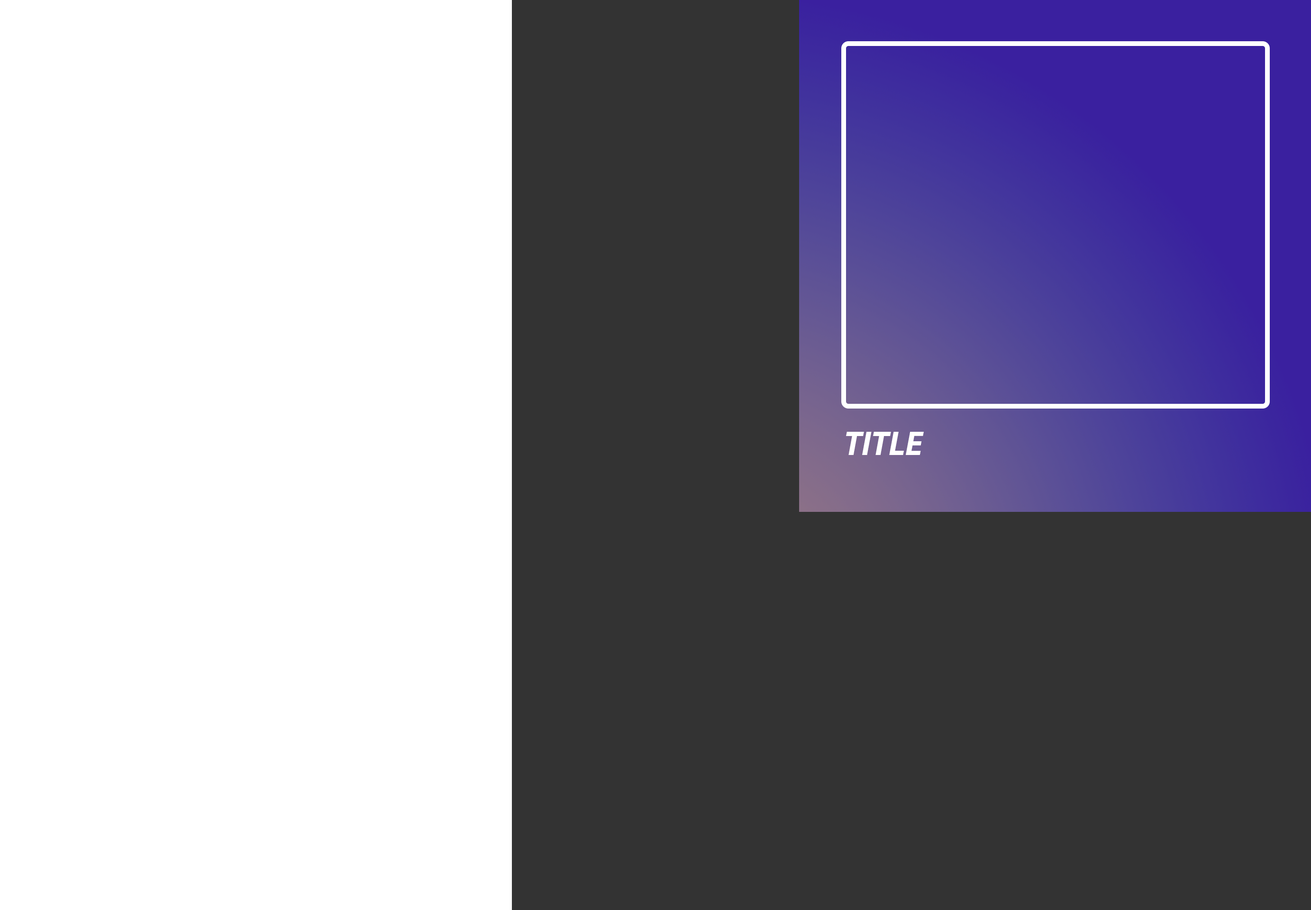
<style>
.page{position:relative;width:1311px;height:910px;background:#ffffff}
.page>*{position:absolute;margin:0}
.t1{font:34.1px "MyriadPro-BoldIt";color:#ffffff}
</style>
<div class="page">
<p class="t1" style="left:846px;top:432px;width:78px;height:23px">TITLE</p>
</div>
